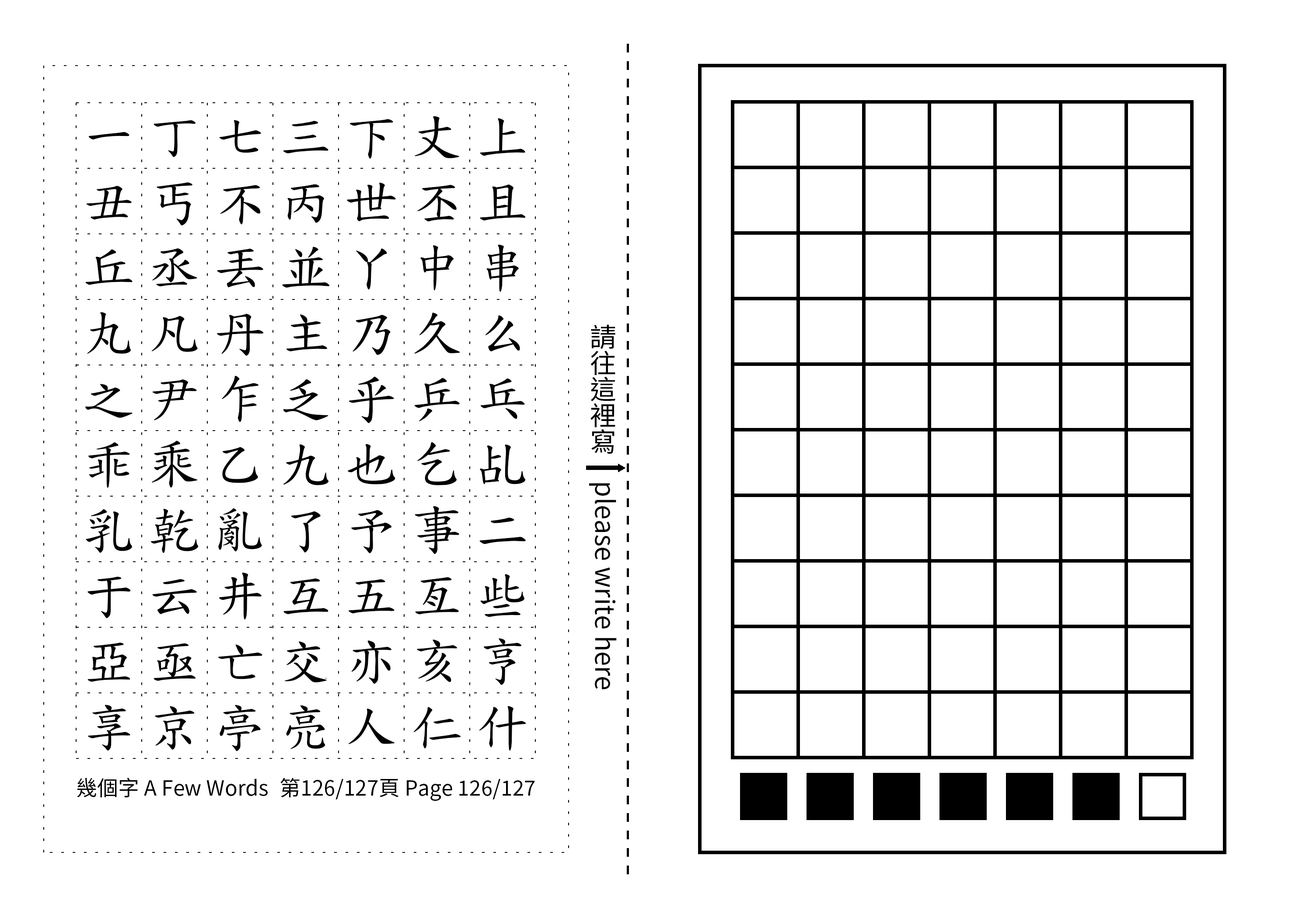
<style>
.page{position:relative;width:1299px;height:918px;background:#ffffff}
.page>*{position:absolute;margin:0}
.t1{font:52.5px/65.6px "TW-Kai-98_1";letter-spacing:0.25em;color:#000000}
.t2{font:26.2px "SourceHanSansTC-Regular";color:#000000}
.t3{font:21px "SourceHanSansTC-Regular";color:#000000}
</style>
<div class="page">
<p class="t1" style="left:85px;top:116px;width:441px;height:636px;text-align:center">一丁七三下丈上丑丐不丙世丕且丘丞丟並丫中串丸凡丹主乃久么之尹乍乏乎乒乓乖乘乙九也乞乩乳乾亂了予事二于云井互五亙些亞亟亡交亦亥亨享京亭亮人仁什</p>
<p class="t2" style="left:589px;top:324px;width:28px;height:366px;text-align:center">請往這裡寫　please write here</p>
<p class="t3" style="left:77px;top:778px;width:191px;height:20px">幾個字 A Few Words</p>
<p class="t3" style="left:280px;top:778px;width:255px;height:23px">第126/127頁 Page 126/127</p>
</div>
